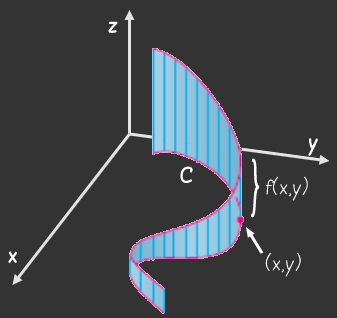
<style>
.page{position:relative;width:337px;height:318px;background:#333333}
.page>*{position:absolute;margin:0}
.t1{font:16px "Blokletters-Viltstift";color:#ffffff}
.t2{font:52.6px "Blokletters-Balpen";color:#ffffff;scale:0.68 1}
.t3{font:16px "Blokletters-Balpen";color:#ffffff}
</style>
<div class="page">
<p class="t1" style="left:108px;top:21px;width:10px;height:12px">z</p>
<p class="t1" style="left:308px;top:138px;width:11px;height:18px">y</p>
<p class="t2" style="left:251px;top:158px;width:9px;height:60px;rotate:-3deg">}</p>
<p class="t1" style="left:180px;top:166px;width:13px;height:17px">C</p>
<p class="t3" style="left:265px;top:176px;width:43px;height:25px">f(x,y)</p>
<p class="t1" style="left:8px;top:251px;width:10px;height:12px">x</p>
<p class="t3" style="left:265px;top:252px;width:36px;height:25px">(x,y)</p>
</div>
